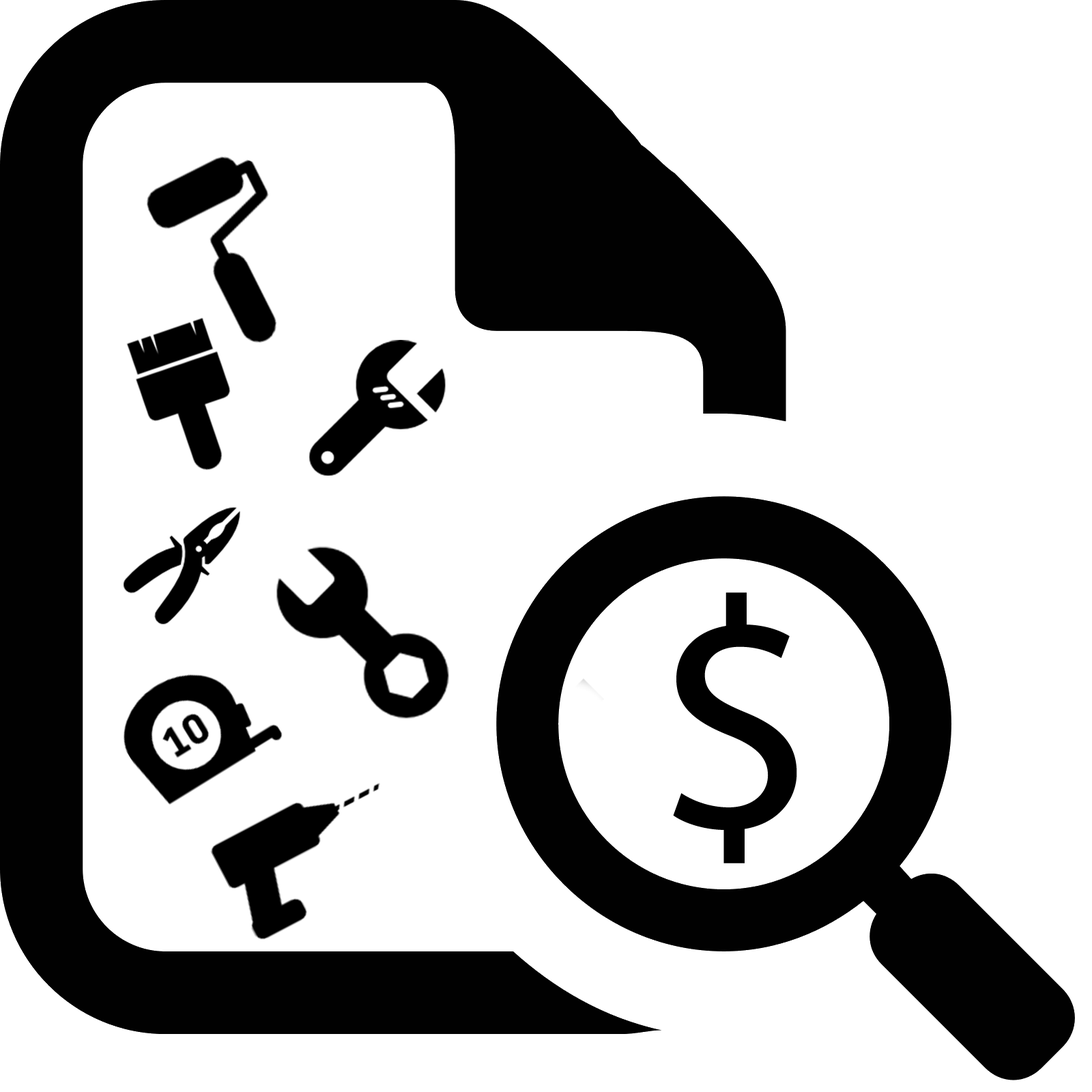
<style>
.page{position:relative;width:1092px;height:1092px;background:#ffffff}
.page>*{position:absolute;margin:0}
.t1{font:329.4px "MyriadPro-Regular";color:#000000}
</style>
<div class="page">
<p class="t1" style="left:673px;top:592px;width:124px;height:271px">$</p>
</div>
